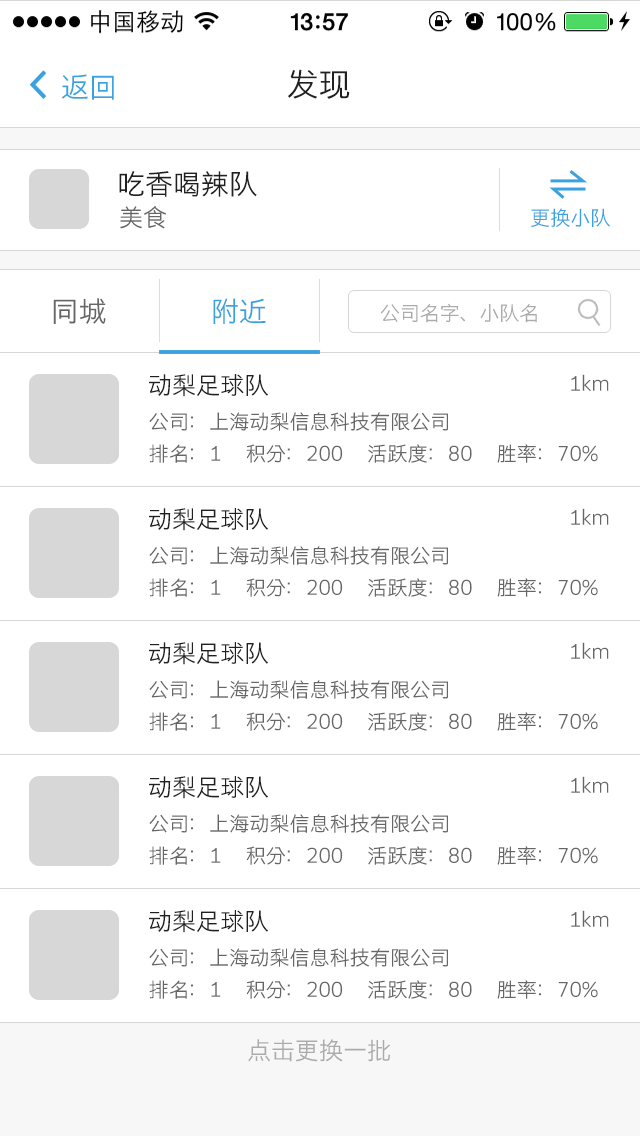
<style>
.page{position:relative;width:640px;height:1136px;background:#ffffff}
.page>*{position:absolute;margin:0}
.t1{font:28px "STHeitiSC-Light";color:#3ba2e0}
.t2{font:32px "STHeitiSC-Light";color:#202020}
.t3{font:28px "STHeitiSC-Light";color:#202020}
.t4{font:24px "STHeitiSC-Light";color:#666666}
.t5{font:20.2px "STHeitiSC-Light";color:#3ba2e0}
.t6{font:28px "STHeitiSC-Light";color:#666666}
.t7{font:20px "STHeitiSC-Light";color:#ababab}
.t8{font:24px "STHeitiSC-Light";color:#202020}
.t9{font:20px "STHeitiSC-Light";color:#666666}
.t10{font:24px "STHeitiSC-Light";color:#ababab}
</style>
<div class="page">
<p class="t1" style="left:61px;top:74px;width:53px;height:26px">返回</p>
<p class="t2" style="left:288px;top:69px;width:62px;height:30px">发现</p>
<p class="t3" style="left:119px;top:171px;width:138px;height:26px">吃香喝辣队</p>
<p class="t4" style="left:120px;top:205px;width:46px;height:24px">美食</p>
<p class="t5" style="left:531px;top:208px;width:79px;height:19px">更换小队</p>
<p class="t6" style="left:53px;top:298px;width:53px;height:26px">同城</p>
<p class="t1" style="left:213px;top:298px;width:53px;height:26px">附近</p>
<p class="t7" style="left:380px;top:303px;width:157px;height:20px">公司名字、小队名</p>
<p class="t8" style="left:149px;top:374px;width:119px;height:23px">动梨足球队</p>
<p class="t9" style="left:571px;top:374px;width:38px;height:17px">1km</p>
<p class="t9" style="left:149px;top:412px;width:299px;height:19px">公司：上海动梨信息科技有限公司</p>
<p class="t9" style="left:149px;top:444px;width:449px;height:19px">排名：1      积分：200      活跃度：80      胜率：70%</p>
<p class="t8" style="left:149px;top:508px;width:119px;height:23px">动梨足球队</p>
<p class="t9" style="left:571px;top:508px;width:38px;height:17px">1km</p>
<p class="t9" style="left:149px;top:546px;width:299px;height:19px">公司：上海动梨信息科技有限公司</p>
<p class="t9" style="left:149px;top:578px;width:449px;height:19px">排名：1      积分：200      活跃度：80      胜率：70%</p>
<p class="t8" style="left:149px;top:642px;width:119px;height:23px">动梨足球队</p>
<p class="t9" style="left:571px;top:642px;width:38px;height:17px">1km</p>
<p class="t9" style="left:149px;top:680px;width:299px;height:19px">公司：上海动梨信息科技有限公司</p>
<p class="t9" style="left:149px;top:712px;width:449px;height:19px">排名：1      积分：200      活跃度：80      胜率：70%</p>
<p class="t8" style="left:149px;top:776px;width:119px;height:23px">动梨足球队</p>
<p class="t9" style="left:571px;top:776px;width:38px;height:17px">1km</p>
<p class="t9" style="left:149px;top:814px;width:299px;height:19px">公司：上海动梨信息科技有限公司</p>
<p class="t9" style="left:149px;top:846px;width:449px;height:19px">排名：1      积分：200      活跃度：80      胜率：70%</p>
<p class="t8" style="left:149px;top:910px;width:119px;height:23px">动梨足球队</p>
<p class="t9" style="left:571px;top:910px;width:38px;height:17px">1km</p>
<p class="t9" style="left:149px;top:948px;width:299px;height:19px">公司：上海动梨信息科技有限公司</p>
<p class="t9" style="left:149px;top:980px;width:449px;height:19px">排名：1      积分：200      活跃度：80      胜率：70%</p>
<p class="t10" style="left:248px;top:1039px;width:142px;height:23px">点击更换一批</p>
</div>
